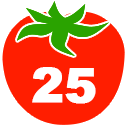
<style>
.page{position:relative;width:128px;height:128px;background:#ff1e00}
.page>*{position:absolute;margin:0}
.t1{font:48px "Arial-Black";color:#ffffff;font-weight:bold}
</style>
<div class="page">
<p class="t1" style="left:32px;top:67px;width:64px;height:37px">25</p>
</div>
